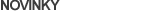
<style>
.page{position:relative;width:159px;height:17px;background:#ffffff}
.page>*{position:absolute;margin:0}
.t1{font:14px "Arial-BoldMT";letter-spacing:-0.05em;color:#3c3c3c;text-transform:uppercase}
</style>
<div class="page">
<p class="t1" style="left:1px;top:0px;width:59px;height:11px">Novinky</p>
</div>
